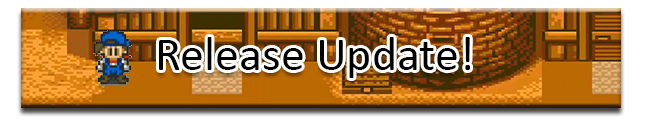
<style>
.page{position:relative;width:659px;height:132px;background:#ffffff}
.page>*{position:absolute;margin:0}
.t1{font:48px "Calibri";color:#000000}
</style>
<div class="page">
<p class="t1" style="left:159px;top:37px;width:312px;height:41px">Release Update!</p>
</div>
